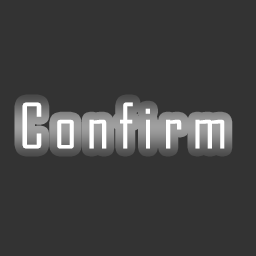
<style>
.page{position:relative;width:256px;height:256px;background:#333333}
.page>*{position:absolute;margin:0}
.t1{font:60px "AgencyFB-Reg";letter-spacing:0.16em;color:#ffffff}
</style>
<div class="page">
<p class="t1" style="left:22px;top:102px;width:203px;height:47px">Confirm</p>
</div>
